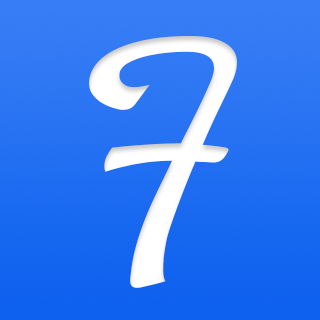
<style>
.page{position:relative;width:320px;height:320px}
.page>*{position:absolute;margin:0}
.t1{font:275px "Satisfy";color:#ffffff}
</style>
<div class="page">
<p class="t1" style="left:89px;top:36px;width:148px;height:252px">F</p>
</div>
